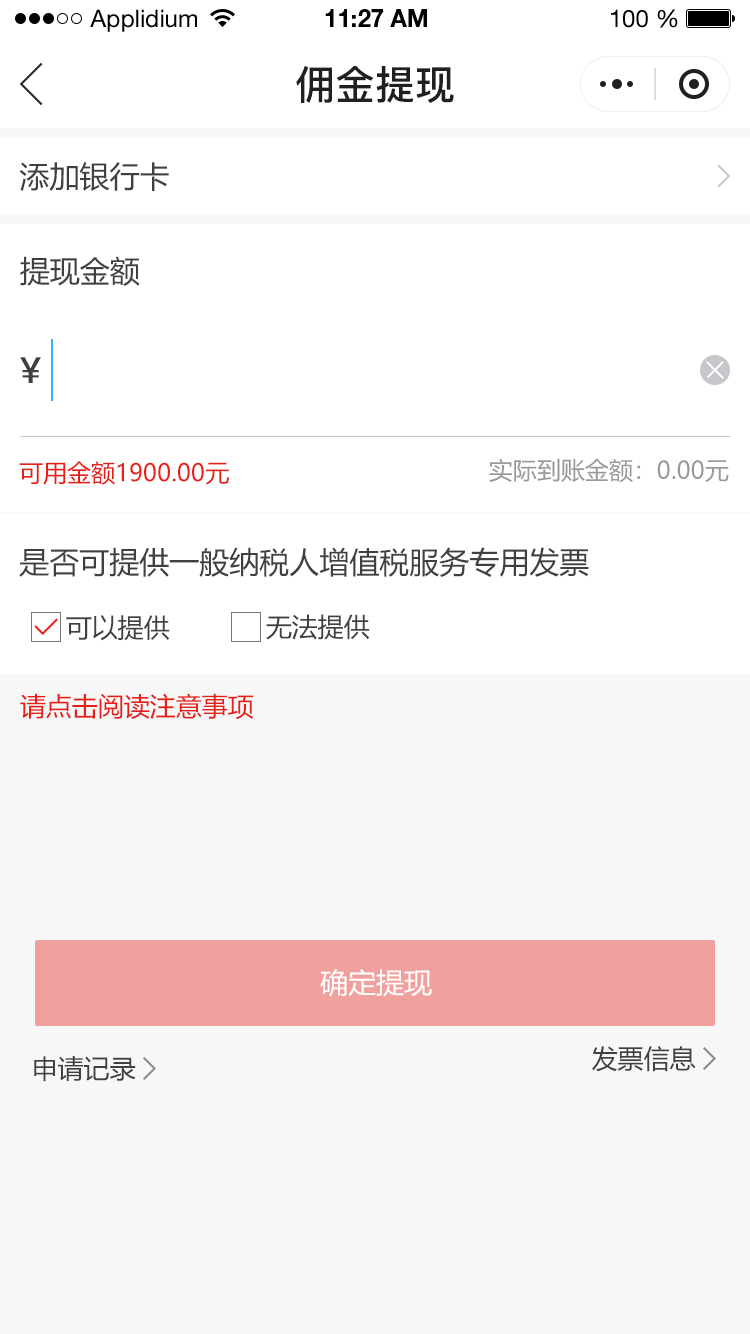
<style>
.page{position:relative;width:750px;height:1334px;background:#f7f7f7}
.page>*{position:absolute;margin:0}
.t1{font:24px "HelveticaNeueLTStd-Roman";color:#000000}
.t2{font:24px "HelveticaNeueLTStd-Bd";color:#000000}
.t3{font:40px "PingFang-SC-Bold";color:#202020;text-transform:uppercase}
.t4{font:30px "MicrosoftYaHei";color:#404040;text-transform:uppercase}
.t5{font:36px "PingFang-SC-Bold";color:#404040;text-transform:uppercase}
.t6{font:24px "MicrosoftYaHei";color:#e61f18;text-transform:uppercase}
.t7{font:24px "MicrosoftYaHei";color:#999999;text-transform:uppercase}
.t8{font:26px "MicrosoftYaHei";color:#404040;text-transform:uppercase}
.t9{font:26px "MicrosoftYaHei";color:#e61f18;text-transform:uppercase}
.t10{font:28px "MicrosoftYaHei";color:#ffffff;text-transform:uppercase}
</style>
<div class="page">
<p class="t1" style="left:90px;top:9px;width:107px;height:23px">Applidium</p>
<p class="t2" style="left:325px;top:9px;width:102px;height:18px">11:27 AM</p>
<p class="t1" style="left:611px;top:9px;width:67px;height:19px">100 %</p>
<p class="t3" style="left:296px;top:65px;width:158px;height:38px">佣金提现</p>
<p class="t4" style="left:19px;top:162px;width:150px;height:29px">添加银行卡</p>
<p class="t4" style="left:20px;top:256px;width:120px;height:30px">提现金额</p>
<p class="t5" style="left:20px;top:357px;width:21px;height:26px">¥</p>
<p class="t6" style="left:19px;top:461px;width:210px;height:24px">可用金额1900.00元</p>
<p class="t7" style="left:489px;top:458px;width:240px;height:25px">实际到账金额：0.00元</p>
<p class="t4" style="left:19px;top:547px;width:570px;height:30px">是否可提供一般纳税人增值税服务专用发票</p>
<p class="t8" style="left:66px;top:615px;width:104px;height:26px">可以提供</p>
<p class="t8" style="left:266px;top:614px;width:104px;height:26px">无法提供</p>
<p class="t9" style="left:20px;top:693px;width:234px;height:27px">请点击阅读注意事项</p>
<p class="t10" style="left:320px;top:969px;width:112px;height:28px">确定提现</p>
<p class="t8" style="left:592px;top:1046px;width:104px;height:26px">发票信息</p>
<p class="t8" style="left:34px;top:1056px;width:102px;height:26px">申请记录</p>
</div>
